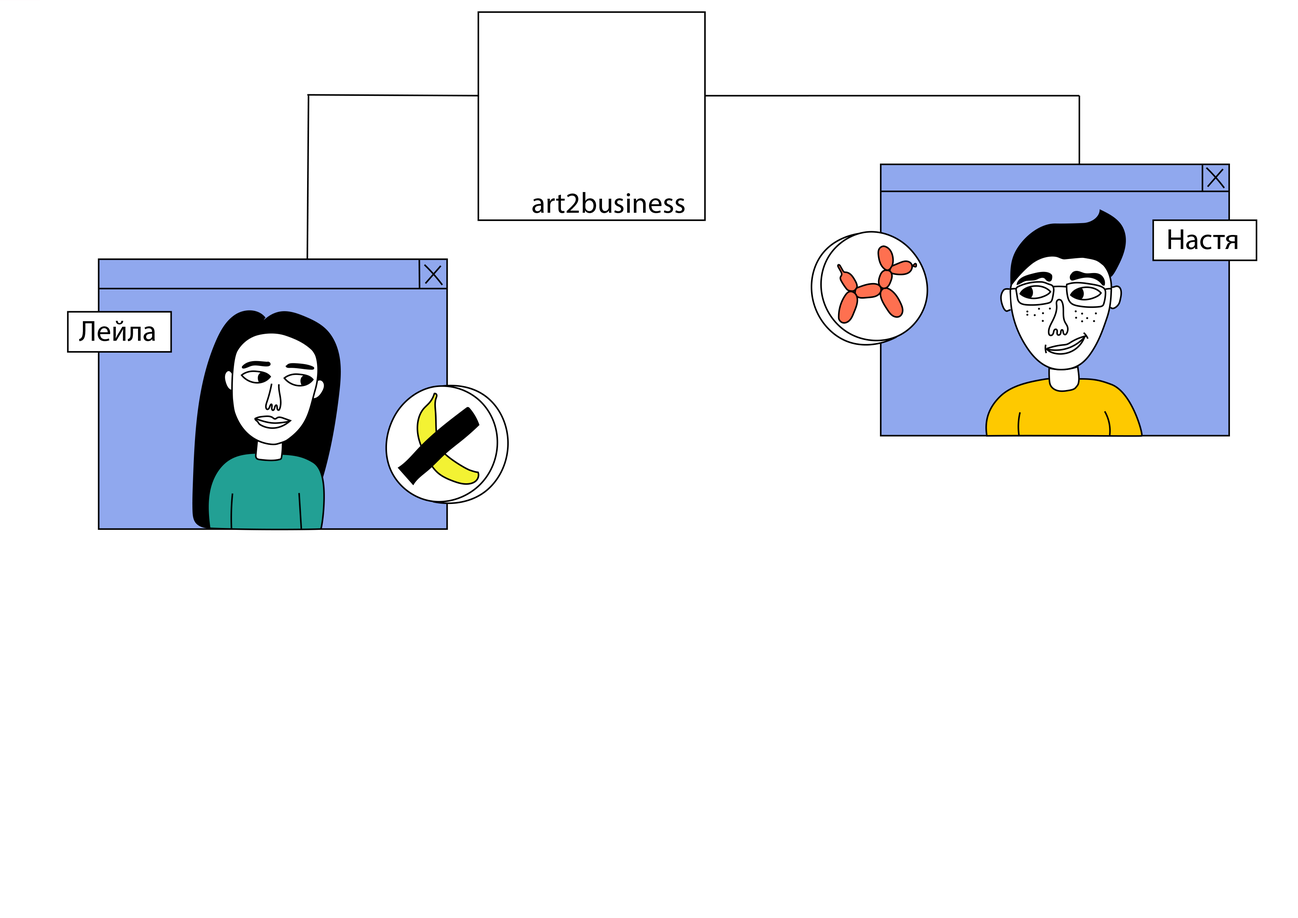
<style>
.page{position:relative;width:1298px;height:918px;background:#ffffff}
.page>*{position:absolute;margin:0}
.t1{font:29.3px "MabryPro-Light";color:#000000}
</style>
<div class="page">
<p class="t1" style="left:533px;top:192px;width:152px;height:21px">art2business</p>
<p class="t1" style="left:1169px;top:229px;width:69px;height:20px">Настя</p>
<p class="t1" style="left:79px;top:321px;width:76px;height:20px">Лейла</p>
</div>
